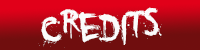
<style>
.page{position:relative;width:200px;height:50px;background:#700e0e}
.page>*{position:absolute;margin:0}
.t1{font:55.4px "YouMurdererBB";color:#fbfbfb}
</style>
<div class="page">
<p class="t1" style="left:38px;top:7px;width:124px;height:41px">creditS</p>
</div>
